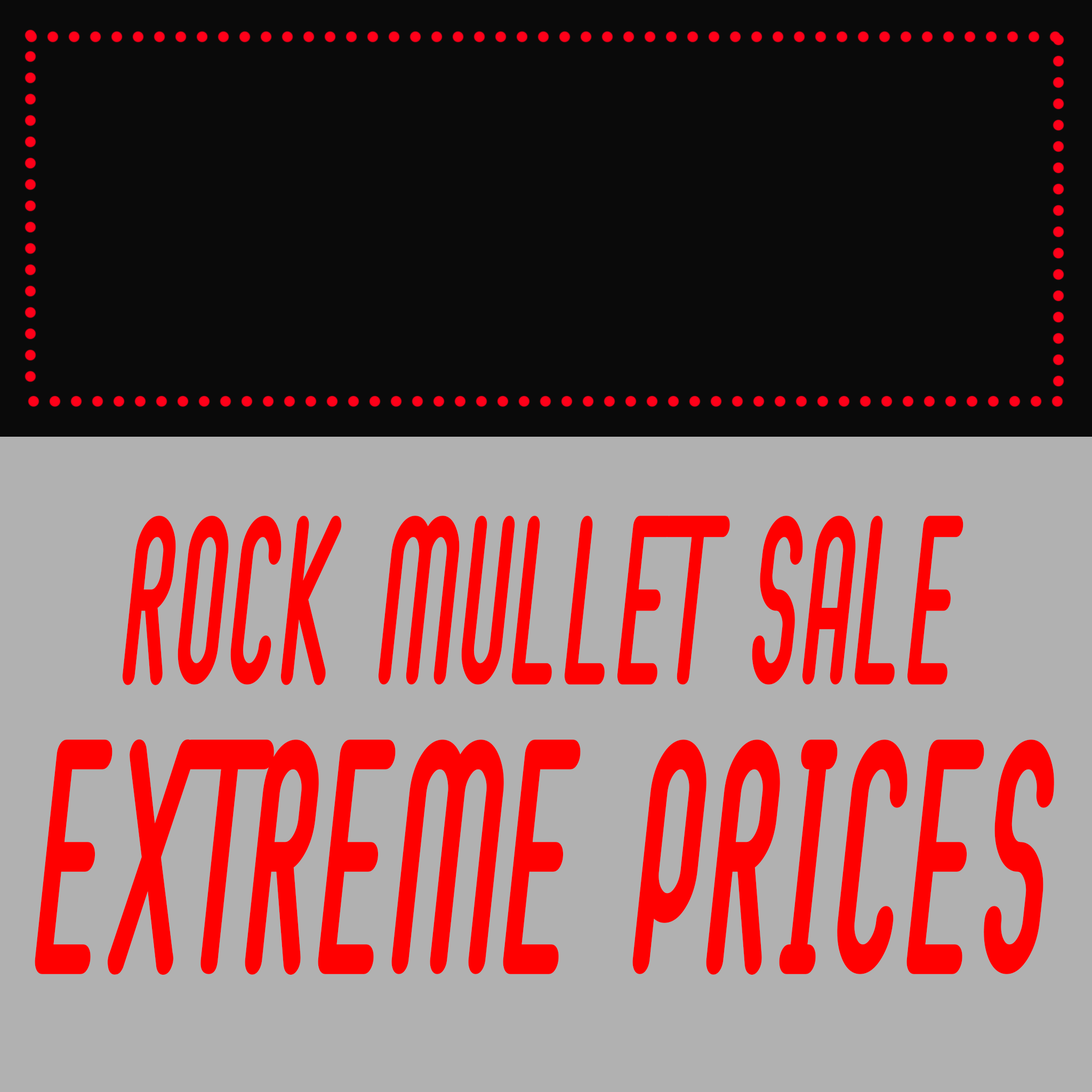
<style>
.page{position:relative;width:1092px;height:1092px;background:#b1b1b1}
.page>*{position:absolute;margin:0}
.t1{font:153.6px/307.7px "BubbleBoy2";color:#ff0000;font-weight:bold;scale:0.5 1}
.t2{font:213.3px/289px "BubbleBoy2";color:#ff0000;font-weight:bold;scale:0.5 1}
</style>
<div class="page">
<p class="t1" style="left:35px;top:516px;width:1019px;height:459px;text-align:center">ROCK MULLET SALE<br><span class="t2">EXTREME PRICES</span></p>
</div>
